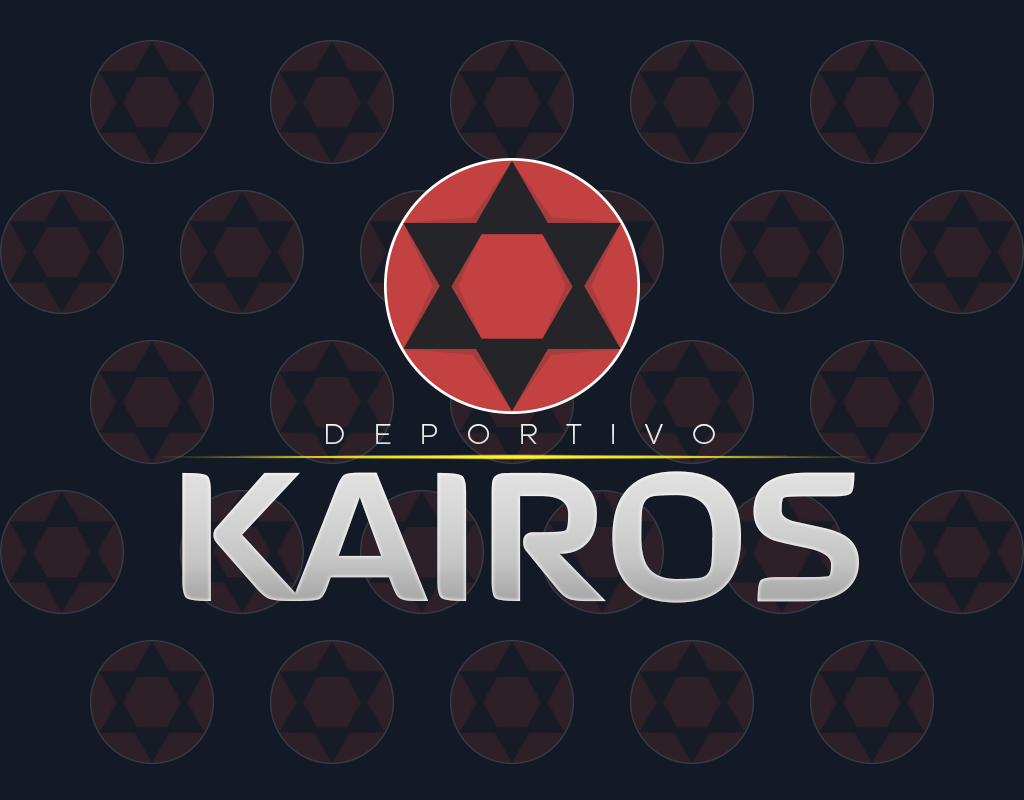
<style>
.page{position:relative;width:1024px;height:800px;background:#131a25}
.page>*{position:absolute;margin:0}
.t1{font:29.2px "Houschka-Light";letter-spacing:1em;color:#e9e9e9}
.t2{font:250px "September-Bold";letter-spacing:0.002em;color:#d1d1d1}
</style>
<div class="page">
<p class="t1" style="left:326px;top:424px;width:389px;height:20px">DEPORTIVO</p>
<p class="t2" style="left:182px;top:471px;width:677px;height:132px">KAIROS</p>
</div>
